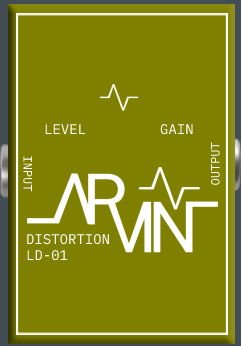
<style>
.page{position:relative;width:241px;height:346px;background:#808000}
.page>*{position:absolute;margin:0}
.t1{font:14px "iAWriterDuospace-Regular";color:#ffffff}
.t2{font:12px "iAWriterDuospace-Regular";color:#ffffff}
</style>
<div class="page">
<p class="t1" style="left:45px;top:124px;width:41px;height:10px">LEVEL</p>
<p class="t1" style="left:160px;top:124px;width:33px;height:11px">GAIN</p>
<p class="t2" style="left:210px;top:142px;width:10px;height:43px;rotate:-90deg">OUTPUT</p>
<p class="t2" style="left:23px;top:156px;width:9px;height:36px;rotate:90deg">INPUT</p>
<p class="t1" style="left:27px;top:234px;width:82px;height:11px">DISTORTION</p>
<p class="t1" style="left:27px;top:250px;width:41px;height:11px">LD-01</p>
</div>
